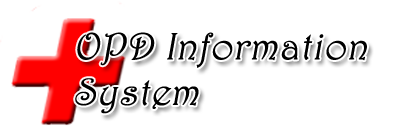
<style>
.page{position:relative;width:420px;height:140px;background:#ffffff}
.page>*{position:absolute;margin:0}
.t1{font:38px "Harrington";color:#000000;font-weight:bold;font-style:italic}
</style>
<div class="page">
<p class="t1" style="left:75px;top:32px;width:292px;height:82px">OPD Information<br>System</p>
</div>
